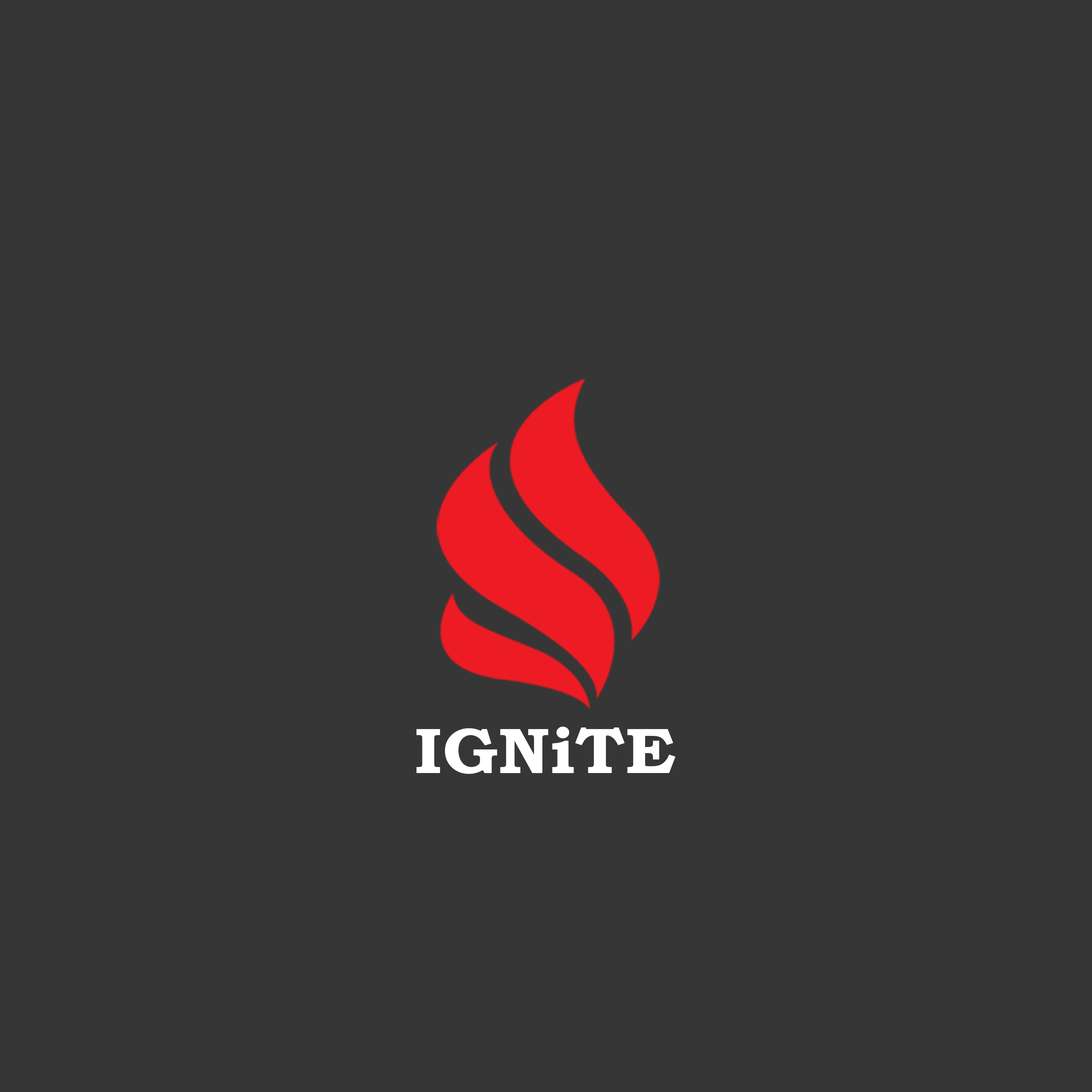
<style>
.page{position:relative;width:1092px;height:1092px;background:#363636}
.page>*{position:absolute;margin:0}
.t1{font:64.6px "BookmanOldStyle-Bold";color:#ffffff;scale:1.09 1}
</style>
<div class="page">
<p class="t1" style="left:416px;top:727px;width:259px;height:47px">IGNiTE</p>
</div>
